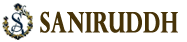
<style>
.page{position:relative;width:187px;height:42px;background:#ffffff}
.page>*{position:absolute;margin:0}
.t1{font:28px "PerpetuaTitlingMT-Bold";color:#473308;font-weight:bold;scale:0.71 1}
</style>
<div class="page">
<p class="t1" style="left:40px;top:11px;width:138px;height:22px">SANIRUDDH</p>
</div>
